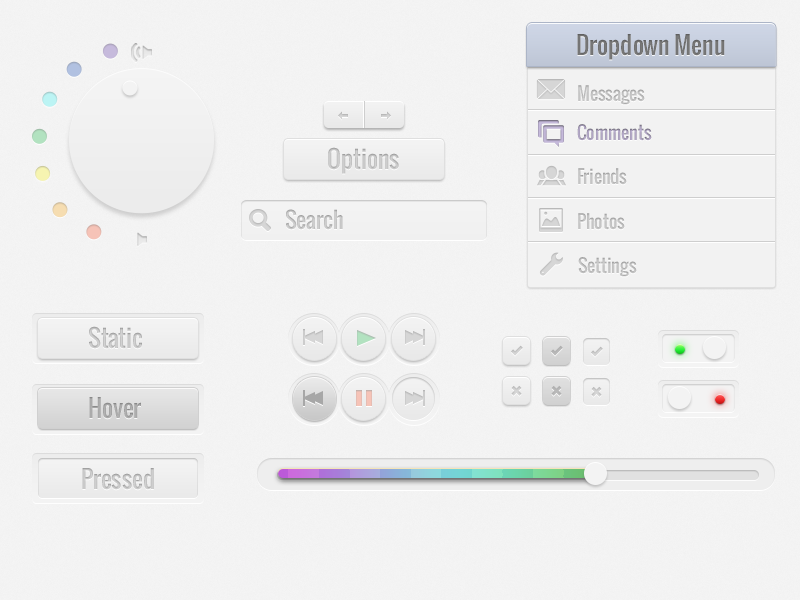
<style>
.page{position:relative;width:800px;height:600px;background:#f3f3f3}
.page>*{position:absolute;margin:0}
.t1{font:24px "Oswald";color:#797979}
.t2{font:18px "Oswald";color:#d2d2d2}
.t3{font:18px "Oswald";color:#aea4c1}
.t4{font:24px "Oswald";color:#d2d2d2}
.t5{font:22px "Oswald";color:#d2d2d2}
.t6{font:24px "Oswald";color:#b2b2b2}
</style>
<div class="page">
<p class="t1" style="left:577px;top:34px;width:148px;height:26px">Dropdown Menu</p>
<p class="t2" style="left:578px;top:85px;width:67px;height:20px">Messages</p>
<p class="t3" style="left:577px;top:124px;width:75px;height:17px">Comments</p>
<p class="t4" style="left:328px;top:147px;width:71px;height:27px">Options</p>
<p class="t2" style="left:578px;top:168px;width:49px;height:17px">Friends</p>
<p class="t5" style="left:286px;top:209px;width:57px;height:21px">Search</p>
<p class="t2" style="left:578px;top:213px;width:47px;height:17px">Photos</p>
<p class="t2" style="left:578px;top:257px;width:59px;height:20px">Settings</p>
<p class="t4" style="left:89px;top:326px;width:53px;height:23px">Static</p>
<p class="t6" style="left:89px;top:397px;width:53px;height:22px">Hover</p>
<p class="t4" style="left:82px;top:468px;width:72px;height:22px">Pressed</p>
</div>
